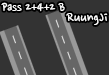
<style>
.page{position:relative;width:109px;height:75px;background:#333333}
.page>*{position:absolute;margin:0}
.t1{font:14px "NanumPen";color:#ffffff}
.t2{font:16px "NanumPen";color:#ffffff}
</style>
<div class="page">
<p class="t1" style="left:1px;top:2px;width:64px;height:10px">Pass 2+4+2 B</p>
<p class="t2" style="left:66px;top:13px;width:42px;height:12px">RuungJi</p>
</div>
